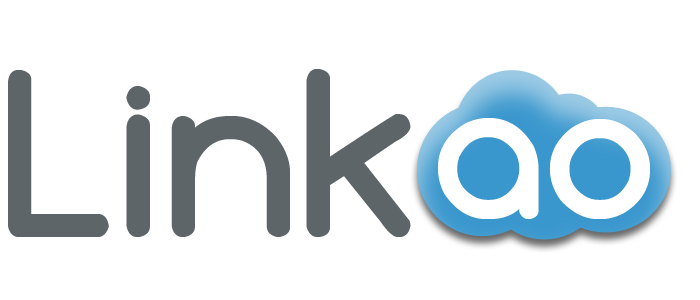
<style>
.page{position:relative;width:700px;height:300px;background:#ffffff}
.page>*{position:absolute;margin:0}
.t1{font:230px "Comfortaa-Bold";color:#5e6569}
.t2{font:190px "Comfortaa-Bold";color:#ffffff}
</style>
<div class="page">
<p class="t1" style="left:8px;top:69px;width:403px;height:168px">Link</p>
<p class="t2" style="left:437px;top:118px;width:213px;height:101px">ao</p>
</div>
